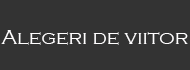
<style>
.page{position:relative;width:190px;height:70px;background:#333333}
.page>*{position:absolute;margin:0}
.t1{font:21px "CopperplateGothic-Light";color:#fffeff}
</style>
<div class="page">
<p class="t1" style="left:1px;top:30px;width:187px;height:15px">Alegeri de viitor</p>
</div>
